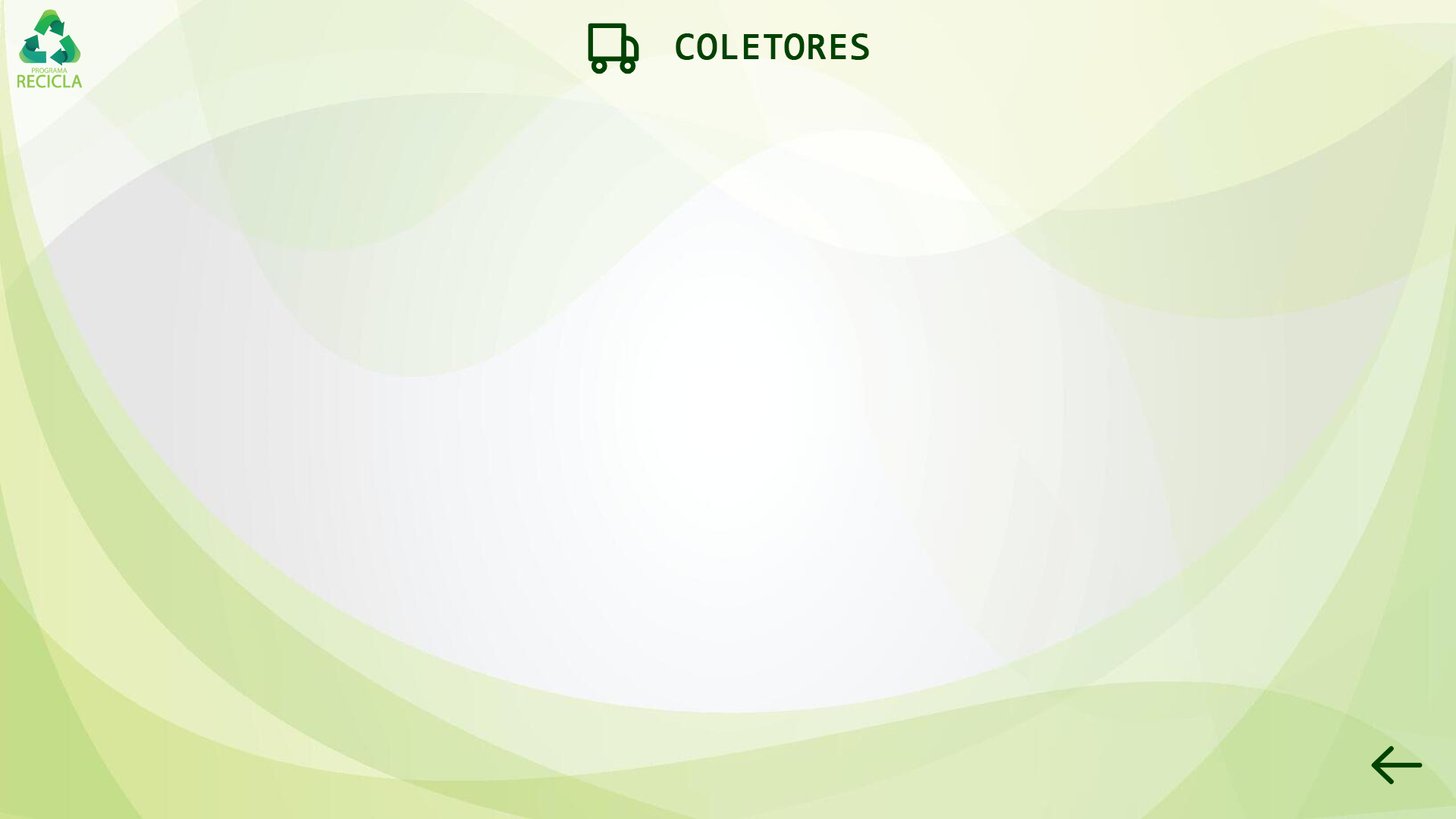
<style>
.page{position:relative;width:1456px;height:819px}
.page>*{position:absolute;margin:0}
.t1{font:37.9px "Consolas";color:#004201;font-weight:bold}
</style>
<div class="page">
<p class="t1" style="left:676px;top:33px;width:193px;height:27px">COLETORES</p>
</div>
